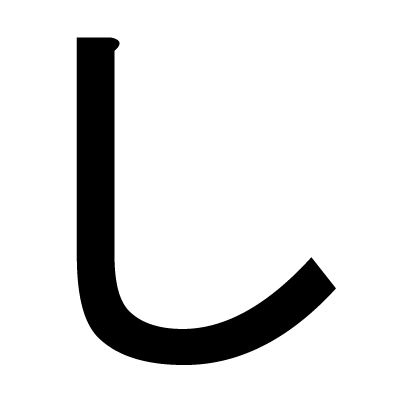
<style>
.page{position:relative;width:400px;height:400px;background:#ffffff}
.page>*{position:absolute;margin:0}
.t1{font:416.7px "MS-PGothic";color:#000000}
</style>
<div class="page">
<p class="t1" style="left:76px;top:37px;width:260px;height:328px">し</p>
</div>
